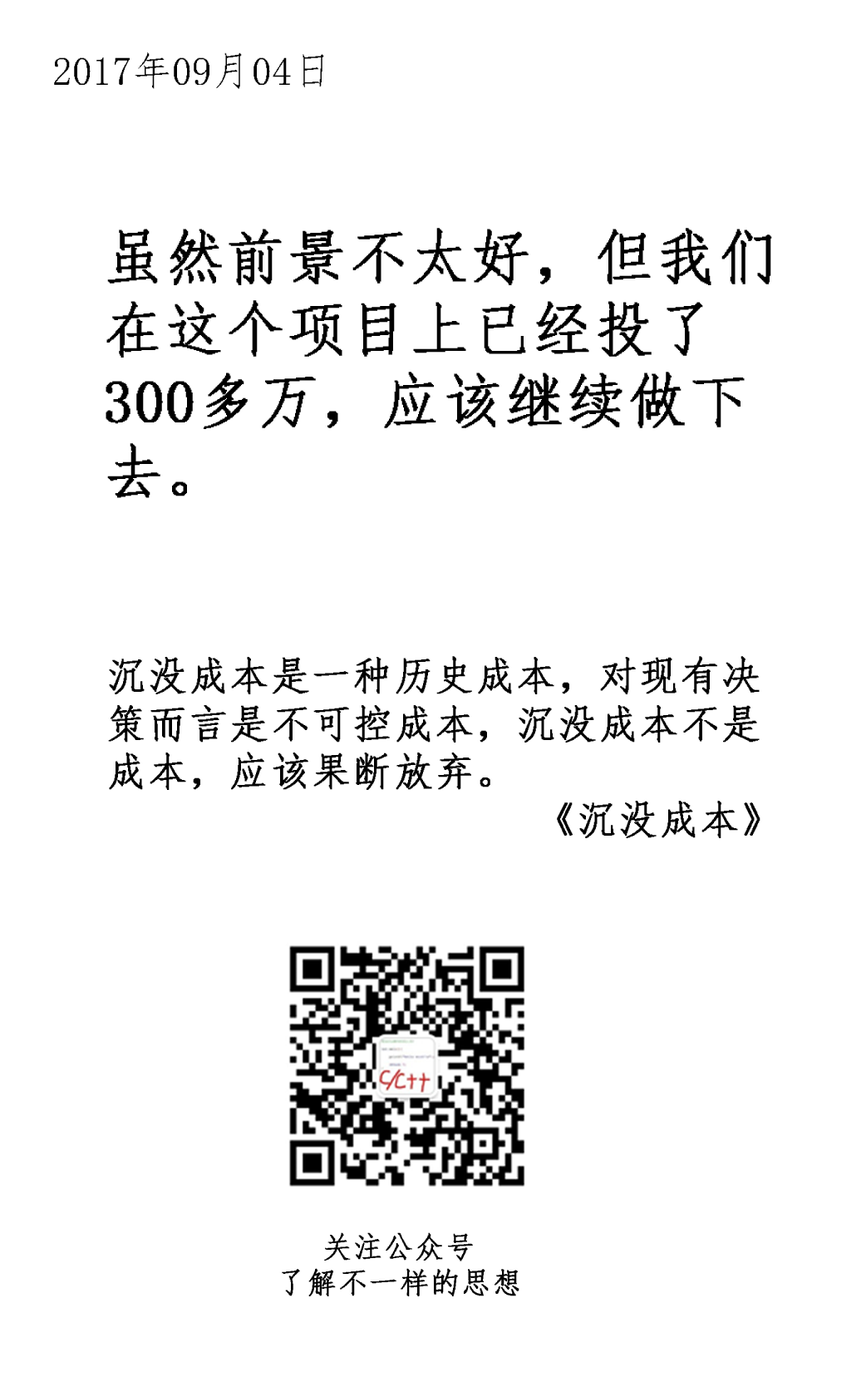
<style>
.page{position:relative;width:866px;height:1377px;background:#ffffff}
.page>*{position:absolute;margin:0}
.t1{font:39.9px "·ÂËÎ-Regular";color:#000000}
.t2{font:59.9px "·ÂËÎ-Regular";letter-spacing:0.025em;color:#000000;font-weight:bold}
.t3{font:39.9px "·ÂËÎ-Regular";letter-spacing:0.025em;color:#000000;font-weight:bold}
.t4{font:29.9px "·ÂËÎ-Regular";letter-spacing:0.025em;color:#000000;font-weight:bold}
</style>
<div class="page">
<p class="t1" style="left:54px;top:52px;width:270px;height:37px">2017年09月04日</p>
<p class="t2" style="left:106px;top:228px;width:666px;height:270px">虽然前景不太好，但我们在这个项目上已经投了300多万，应该继续做下去。</p>
<p class="t3" style="left:108px;top:656px;width:653px;height:182px">沉没成本是一种历史成本，对现有决策而言是不可控成本，沉没成本不是成本，应该果断放弃。<br>《沉没成本》</p>
<p class="t4" style="left:282px;top:1232px;width:238px;height:64px;text-align:center">关注公众号<br>了解不一样的思想</p>
</div>
